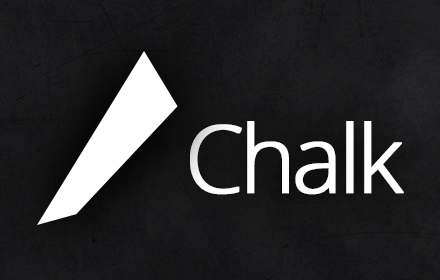
<style>
.page{position:relative;width:440px;height:280px}
.page>*{position:absolute;margin:0}
.t1{font:93.5px "OpenSans-Light";letter-spacing:-0.06em;color:#ffffff;font-weight:bold}
</style>
<div class="page">
<p class="t1" style="left:190px;top:121px;width:214px;height:74px">Chalk</p>
</div>
